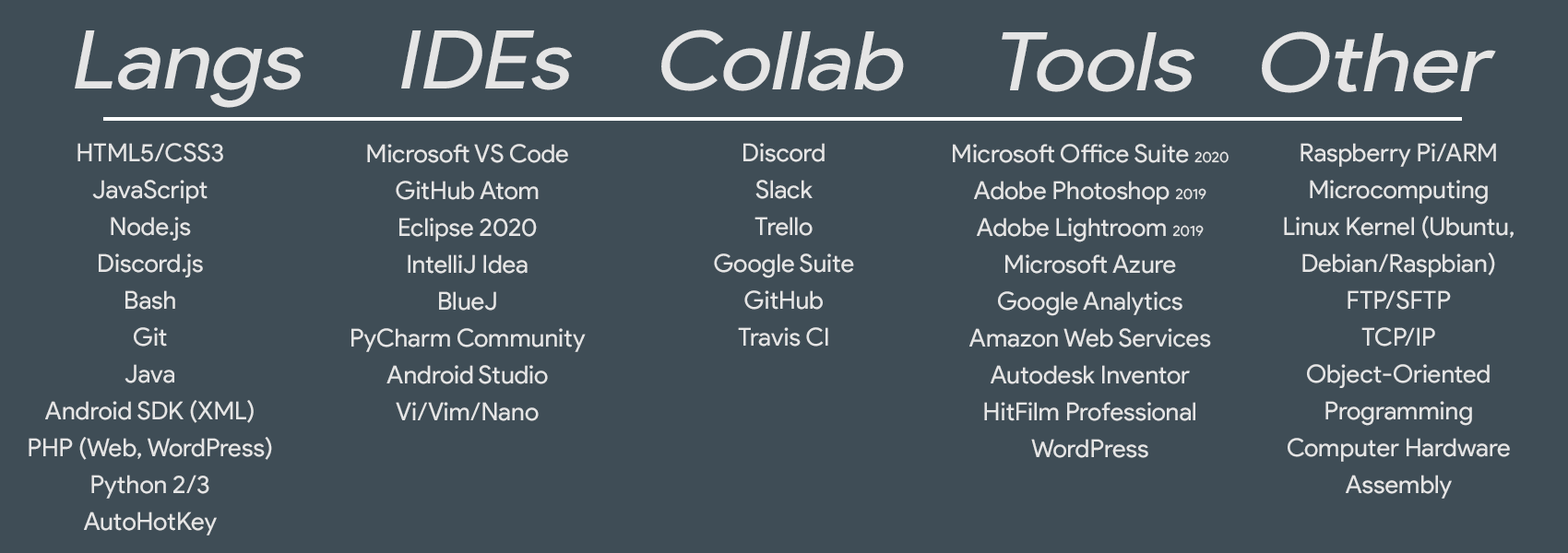
<style>
.page{position:relative;width:1568px;height:553px;background:#3f4d56}
.page>*{position:absolute;margin:0}
.t1{font:81.2px "ProductSans-Regular";color:#e5e5e5;font-style:italic;scale:1.11 1}
.t2{font:24.9px/36.9px "ProductSans-Regular";color:#e5e5e5}
.t3{font:14.8px/36.9px "ProductSans-Regular";color:#e5e5e5}
</style>
<div class="page">
<p class="t1" style="left:661px;top:30px;width:243px;height:61px">Collab</p>
<p class="t1" style="left:75px;top:30px;width:228px;height:78px">Langs</p>
<p class="t1" style="left:401px;top:30px;width:171px;height:60px">IDEs</p>
<p class="t1" style="left:1002px;top:32px;width:192px;height:60px">Tools</p>
<p class="t1" style="left:1262px;top:31px;width:234px;height:62px">Other</p>
<p class="t2" style="left:29px;top:143px;width:243px;height:393px;text-align:center">HTML5/CSS3<br>JavaScript<br>Node.js<br>Discord.js<br>Bash<br>Git<br>Java<br>Android SDK (XML)<br>PHP (Web, WordPress)<br>Python 2/3<br>AutoHotKey</p>
<p class="t2" style="left:351px;top:144px;width:235px;height:278px;text-align:center">Microsoft VS Code<br>GitHub Atom<br>Eclipse 2020<br>IntelliJ Idea<br>BlueJ<br>PyCharm Community<br>Android Studio<br>Vi/Vim/Nano</p>
<p class="t2" style="left:714px;top:143px;width:140px;height:204px;text-align:center">Discord<br>Slack<br>Trello<br>Google Suite<br>GitHub<br>Travis CI</p>
<p class="t2" style="left:953px;top:144px;width:276px;height:314px;text-align:center">Microsoft Office Suite <span class="t3">2020<br></span>Adobe Photoshop <span class="t3">2019<br></span>Adobe Lightroom <span class="t3">2019<br></span>Microsoft Azure<br>Google Analytics<br>Amazon Web Services<br>Autodesk Inventor<br>HitFilm Professional<br>WordPress</p>
<p class="t2" style="left:1284px;top:143px;width:230px;height:356px;text-align:center">Raspberry Pi/ARM Microcomputing<br>Linux Kernel (Ubuntu, Debian/Raspbian)<br>FTP/SFTP<br>TCP/IP<br>Object-Oriented Programming<br>Computer Hardware Assembly</p>
</div>
